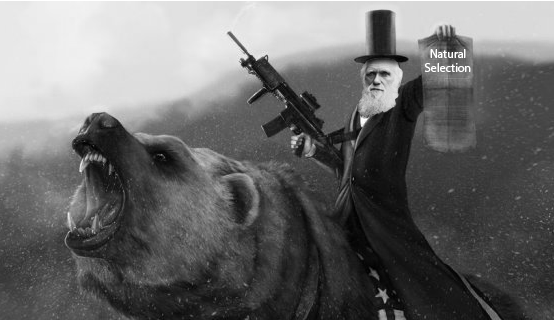
<style>
.page{position:relative;width:554px;height:320px}
.page>*{position:absolute;margin:0}
.t1{font:12px "MyriadPro-Regular";color:#ffffff}
</style>
<div class="page">
<p class="t1" style="left:424px;top:49px;width:47px;height:23px;text-align:center">Natural<br>Selection</p>
</div>
